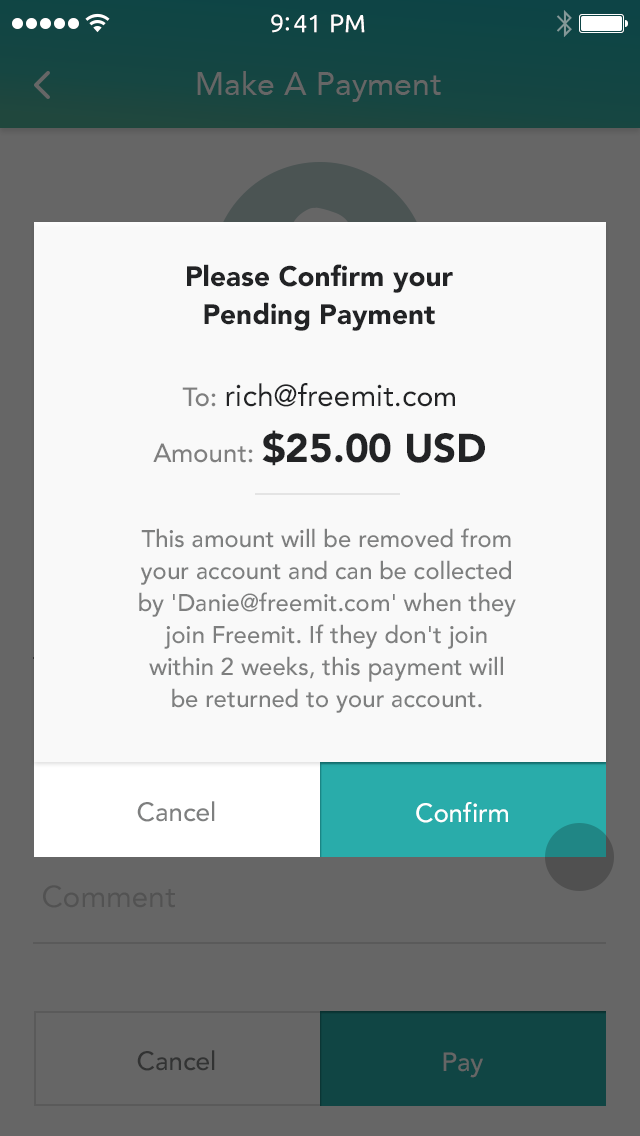
<style>
.page{position:relative;width:640px;height:1136px;background:#f9f9f9}
.page>*{position:absolute;margin:0}
.t1{font:28px/38px "Avenir-Black";color:#222325}
.t2{font:30px/56px "Avenir-Roman";color:#222325}
.t3{font:26px/56px "Avenir-Medium";color:#7f7f7f}
.t4{font:28px/56px "Avenir-Medium";color:#222325}
.t5{font:40px/56px "Avenir-Black";color:#222325}
.t6{font:24px/32px "Avenir-Medium";color:#7e7f7f}
.t7{font:26px "Avenir-Medium";color:#7e7f7f}
.t8{font:26px "Avenir-Medium";color:#ffffff}
</style>
<div class="page">
<p class="t1" style="left:187px;top:264px;width:266px;height:67px;text-align:center">Please Confirm your<br>Pending Payment</p>
<p class="t2" style="left:153px;top:383px;width:332px;height:83px;text-align:center"><span class="t3">To: </span>rich@freemit.c<span class="t4">om<br></span><span class="t3">Amount: </span><span class="t5">$25.00 USD</span></p>
<p class="t6" style="left:139px;top:528px;width:377px;height:185px;text-align:center">This amount will be removed from your account and can be collected by 'Danie@freemit.com' when they join Freemit. If they don't join within 2 weeks, this payment will be returned to your account.</p>
<p class="t7" style="left:137px;top:801px;width:78px;height:21px">Cancel</p>
<p class="t8" style="left:416px;top:802px;width:92px;height:21px">Confirm</p>
</div>
